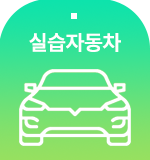
<style>
.page{position:relative;width:150px;height:160px}
.page>*{position:absolute;margin:0}
.t1{font:21.3px "Pretendard-SemiBold";color:#ffffff}
</style>
<div class="page">
<p class="t1" style="left:29px;top:33px;width:92px;height:19px">실습자동차</p>
</div>
